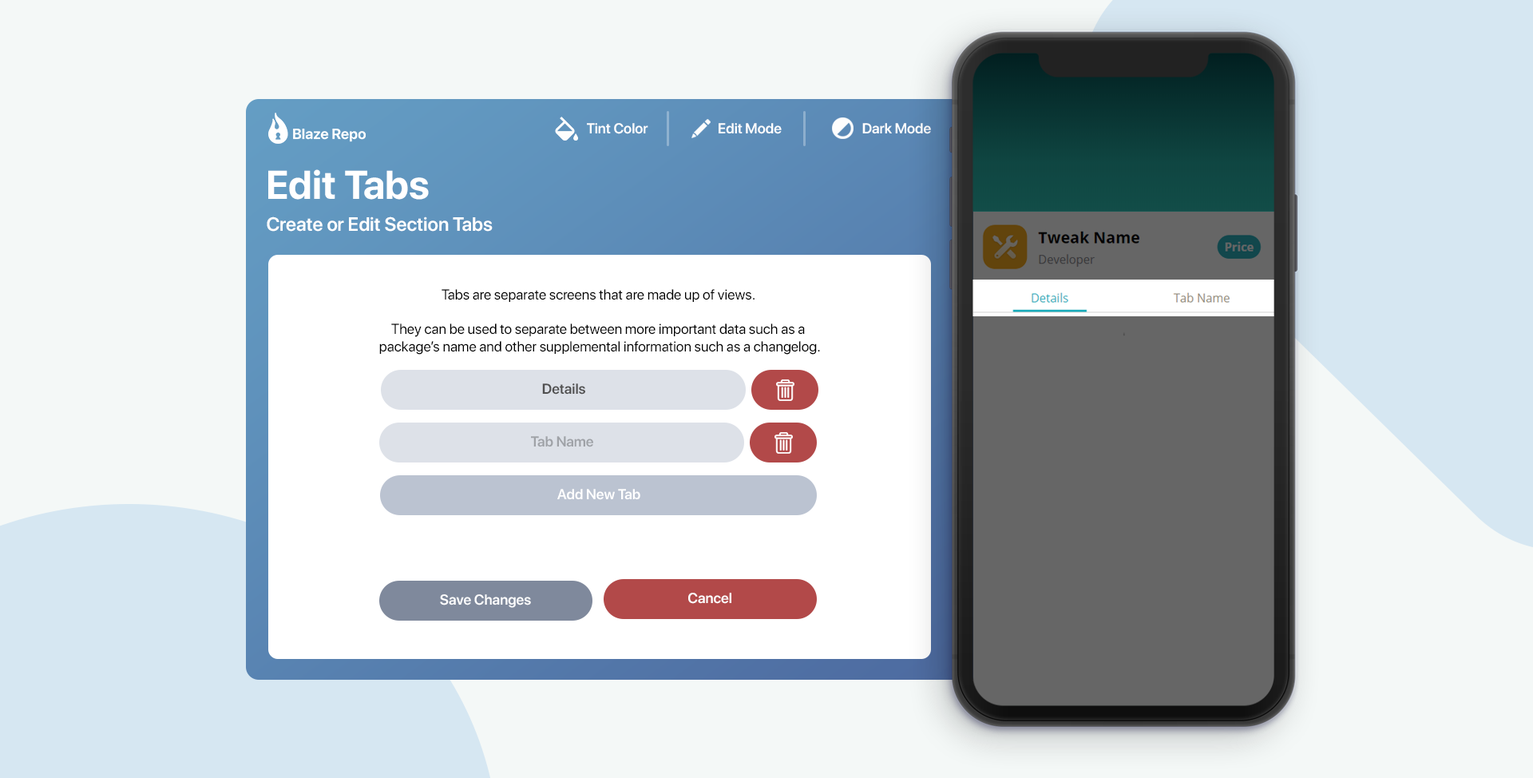
<style>
.page{position:relative;width:1533px;height:778px;background:#f4f8f7}
.page>*{position:absolute;margin:0}
.t1{font:14.4px "SFProDisplay-Semibold";color:#ffffff}
.t2{font:39.9px "SFProDisplay-Bold";color:#ffffff}
.t3{font:19.2px "SFProDisplay-Semibold";color:#ffffff}
.t4{font:14.4px "SFProDisplay-Regular";color:#000000}
.t5{font:14.4px "SFProDisplay-Semibold";color:#505050}
.t6{font:14.4px "SFProDisplay-Semibold";color:#9fa2a7}
</style>
<div class="page">
<p class="t1" style="left:587px;top:123px;width:61px;height:11px">Tint Color</p>
<p class="t1" style="left:719px;top:123px;width:63px;height:11px">Edit Mode</p>
<p class="t1" style="left:862px;top:123px;width:69px;height:11px">Dark Mode</p>
<p class="t2" style="left:268px;top:169px;width:161px;height:31px">Edit Tabs</p>
<p class="t3" style="left:267px;top:216px;width:226px;height:16px">Create or Edit Section Tabs</p>
<p class="t4" style="left:379px;top:289px;width:441px;height:66px;text-align:center">Tabs are separate screens that are made up of views. <br><br>They can be used to separate between more important data such as a <br>package’s name and other supplemental information such as a changelog.</p>
<p class="t5" style="left:542px;top:383px;width:43px;height:11px">Details</p>
<p class="t6" style="left:531px;top:436px;width:62px;height:11px">Tab Name</p>
<p class="t1" style="left:557px;top:489px;width:83px;height:11px">Add New Tab</p>
<p class="t1" style="left:688px;top:593px;width:43px;height:11px">Cancel</p>
<p class="t1" style="left:440px;top:594px;width:91px;height:14px">Save Changes</p>
</div>
